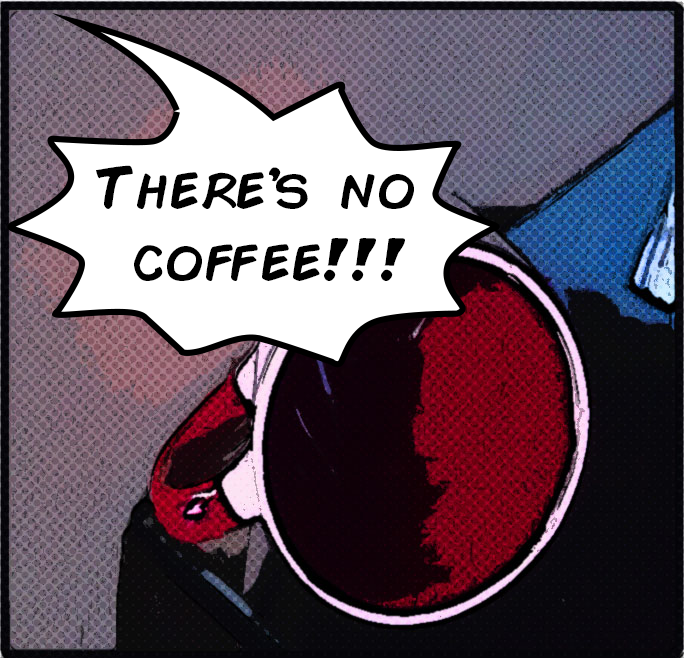
<style>
.page{position:relative;width:684px;height:658px}
.page>*{position:absolute;margin:0}
.t1{font:60px "ComicBook";color:#000000}
</style>
<div class="page">
<p class="t1" style="left:96px;top:165px;width:318px;height:116px;text-align:center">There’s no<br> coffee!!!</p>
</div>
